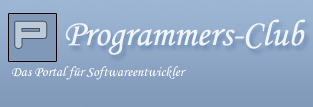
<style>
.page{position:relative;width:313px;height:107px}
.page>*{position:absolute;margin:0}
.t1{font:46px "RadioStars";color:#bdcada}
.t2{font:37px "MonotypeCorsiva";color:#ffffff}
.t3{font:14px "MonotypeCorsiva";color:#ffffff}
</style>
<div class="page">
<p class="t1" style="left:15px;top:21px;width:32px;height:27px">P</p>
<p class="t2" style="left:65px;top:19px;width:241px;height:36px;opacity:0.87">Programmers-Club</p>
<p class="t3" style="left:12px;top:66px;width:174px;height:14px">Das Portal für Softwareentwickler</p>
</div>
